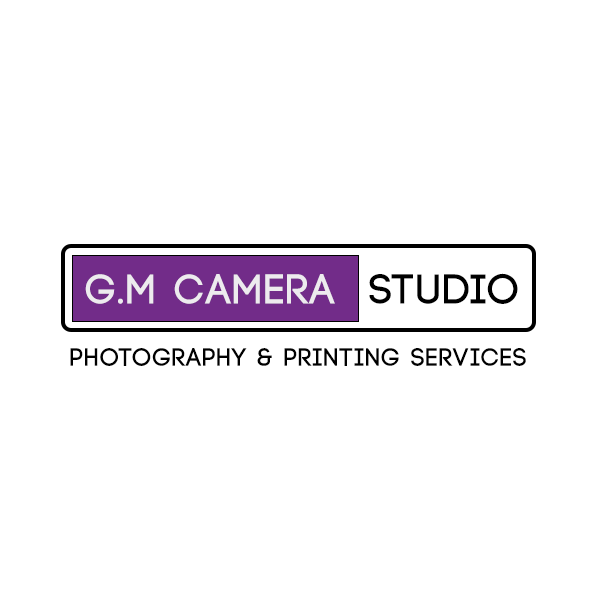
<style>
.page{position:relative;width:600px;height:600px;background:#ffffff}
.page>*{position:absolute;margin:0}
.t1{font:41.7px "Code-Bold";letter-spacing:0.05em;color:#edebee}
.t2{font:41.7px "Code-Bold";letter-spacing:0.05em;color:#000000}
.t3{font:25px "Code-Bold";letter-spacing:0.05em;color:#000000}
</style>
<div class="page">
<p class="t1" style="left:85px;top:274px;width:250px;height:30px">G.M CAMERA</p>
<p class="t2" style="left:369px;top:273px;width:149px;height:31px">STUDIO</p>
<p class="t3" style="left:70px;top:348px;width:456px;height:18px">PHOTOGRAPHY &amp; PRINTING SERVICES</p>
</div>
